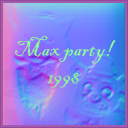
<style>
.page{position:relative;width:128px;height:128px}
.page>*{position:absolute;margin:0}
.t1{font:23px "BlackadderITC-Regular";color:#8dff8d}
</style>
<div class="page">
<p class="t1" style="left:15px;top:36px;width:101px;height:52px;text-align:center">Max party!<br>1998</p>
</div>
